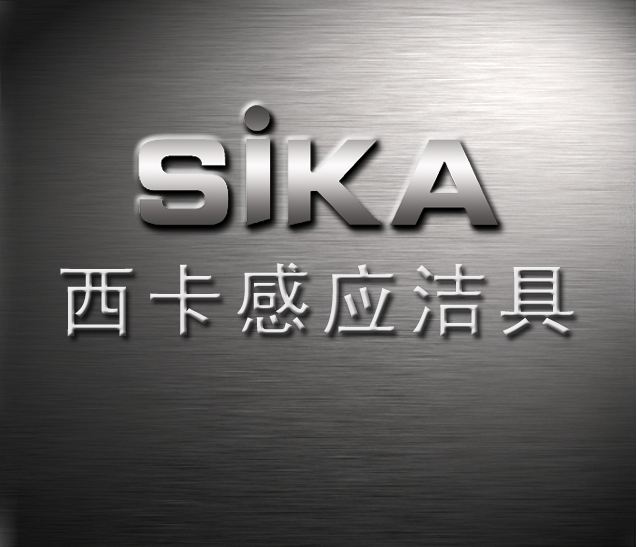
<style>
.page{position:relative;width:637px;height:547px}
.page>*{position:absolute;margin:0}
.t1{font:80px "SimHei";letter-spacing:0.1em}
</style>
<div class="page">
<p class="t1" style="left:60px;top:262px;width:514px;height:75px">西卡感应洁具</p>
</div>
